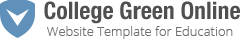
<style>
.page{position:relative;width:245px;height:40px;background:#ffffff}
.page>*{position:absolute;margin:0}
.t1{font:24px "HelveticaNeue-CondensedBold";color:#666666}
.t2{font:13px "OpenSans-Light";color:#6e6e6e}
</style>
<div class="page">
<p class="t1" style="left:44px;top:1px;width:196px;height:23px">College Green Online</p>
<p class="t2" style="left:47px;top:26px;width:186px;height:13px">Website Template for Education</p>
</div>
